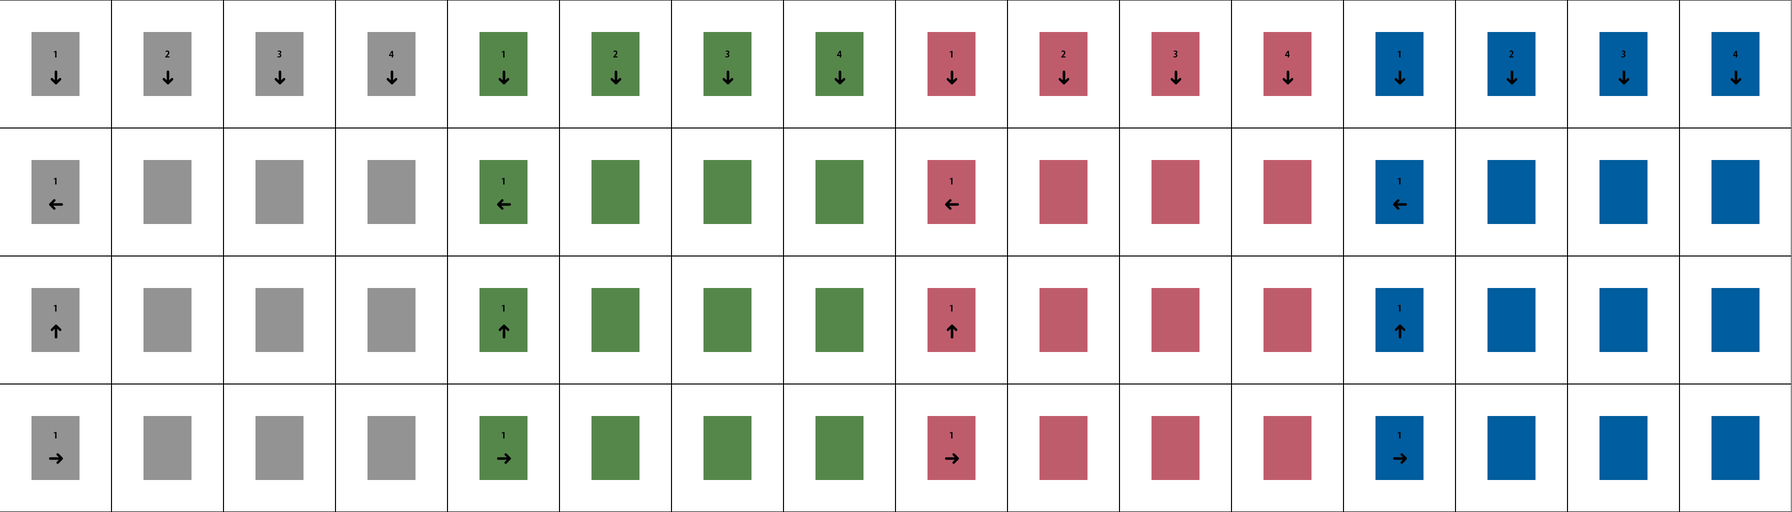
<style>
.page{position:relative;width:1792px;height:512px;background:#ffffff}
.page>*{position:absolute;margin:0}
.t1{font:9px "KozGoPr6N-Bold";color:#000000}
</style>
<div class="page">
<p class="t1" style="left:54px;top:50px;width:2px;height:8px">1</p>
<p class="t1" style="left:165px;top:50px;width:5px;height:8px">2</p>
<p class="t1" style="left:277px;top:50px;width:5px;height:8px">3</p>
<p class="t1" style="left:389px;top:50px;width:5px;height:8px">4</p>
<p class="t1" style="left:502px;top:50px;width:2px;height:8px">1</p>
<p class="t1" style="left:613px;top:50px;width:5px;height:8px">2</p>
<p class="t1" style="left:725px;top:50px;width:5px;height:8px">3</p>
<p class="t1" style="left:837px;top:50px;width:5px;height:8px">4</p>
<p class="t1" style="left:950px;top:50px;width:2px;height:8px">1</p>
<p class="t1" style="left:1061px;top:50px;width:5px;height:8px">2</p>
<p class="t1" style="left:1173px;top:50px;width:5px;height:8px">3</p>
<p class="t1" style="left:1285px;top:50px;width:5px;height:8px">4</p>
<p class="t1" style="left:1398px;top:50px;width:2px;height:8px">1</p>
<p class="t1" style="left:1509px;top:50px;width:5px;height:8px">2</p>
<p class="t1" style="left:1621px;top:50px;width:5px;height:8px">3</p>
<p class="t1" style="left:1733px;top:50px;width:5px;height:8px">4</p>
<p class="t1" style="left:54px;top:178px;width:2px;height:6px">1</p>
<p class="t1" style="left:502px;top:178px;width:2px;height:6px">1</p>
<p class="t1" style="left:950px;top:178px;width:2px;height:6px">1</p>
<p class="t1" style="left:1398px;top:178px;width:2px;height:6px">1</p>
<p class="t1" style="left:54px;top:304px;width:2px;height:8px">1</p>
<p class="t1" style="left:502px;top:304px;width:2px;height:8px">1</p>
<p class="t1" style="left:950px;top:304px;width:2px;height:8px">1</p>
<p class="t1" style="left:1398px;top:304px;width:2px;height:8px">1</p>
<p class="t1" style="left:54px;top:432px;width:2px;height:6px">1</p>
<p class="t1" style="left:502px;top:432px;width:2px;height:6px">1</p>
<p class="t1" style="left:950px;top:432px;width:2px;height:6px">1</p>
<p class="t1" style="left:1398px;top:432px;width:2px;height:6px">1</p>
</div>
